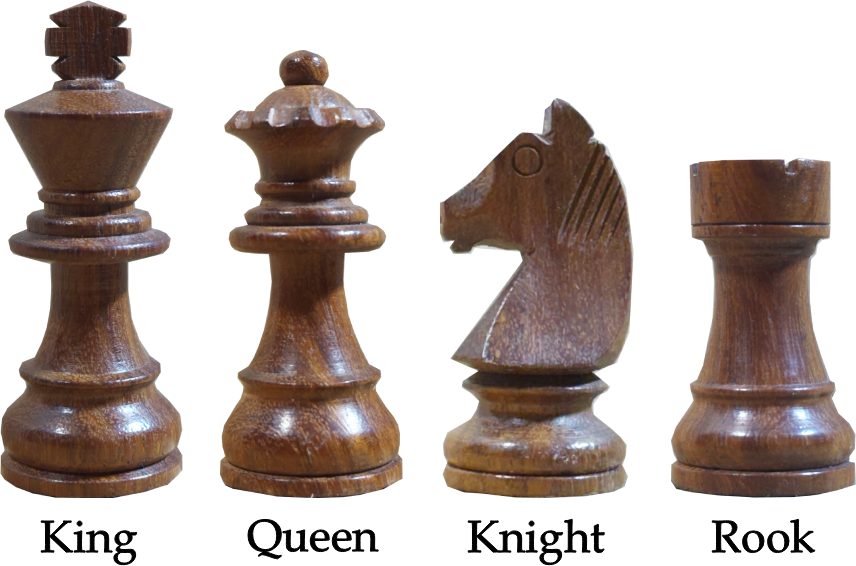
<style>
.page{position:relative;width:856px;height:566px;background:#ffffff}
.page>*{position:absolute;margin:0}
.t1{font:45px "BookAntiqua";color:#000000}
</style>
<div class="page">
<p class="t1" style="left:40px;top:519px;width:98px;height:47px">King</p>
<p class="t1" style="left:247px;top:518px;width:133px;height:42px">Queen</p>
<p class="t1" style="left:467px;top:518px;width:139px;height:48px">Knight</p>
<p class="t1" style="left:711px;top:518px;width:105px;height:36px">Rook</p>
</div>
